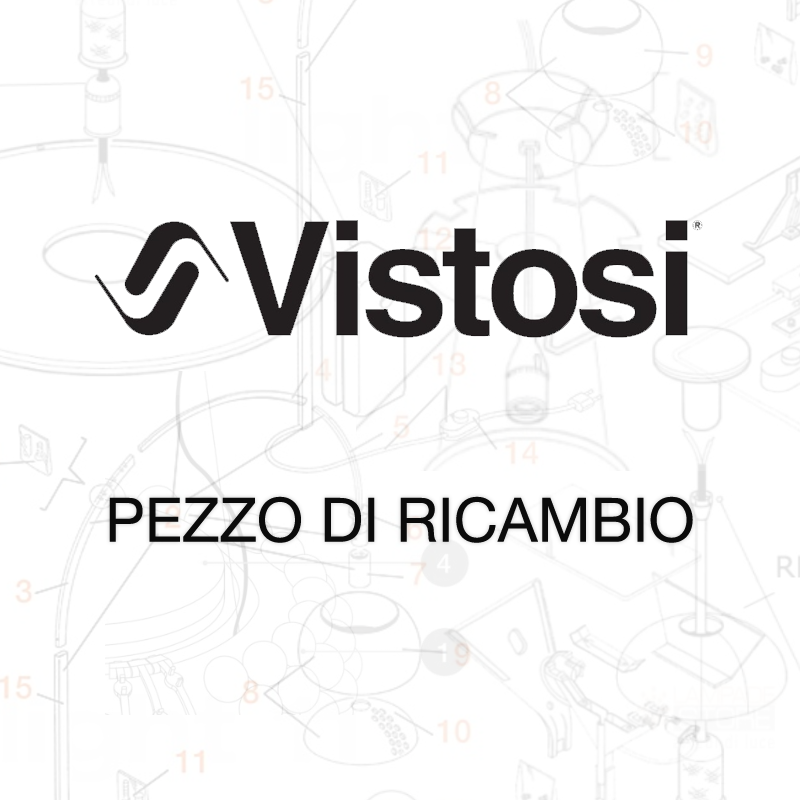
<style>
.page{position:relative;width:800px;height:800px;background:#ffffff}
.page>*{position:absolute;margin:0}
.t1{font:61.1px "HelveticaNeue";color:#0b0b0b;text-transform:uppercase}
</style>
<div class="page">
<p class="t1" style="left:109px;top:496px;width:584px;height:47px">PEZZO di RICAMBIO</p>
</div>
